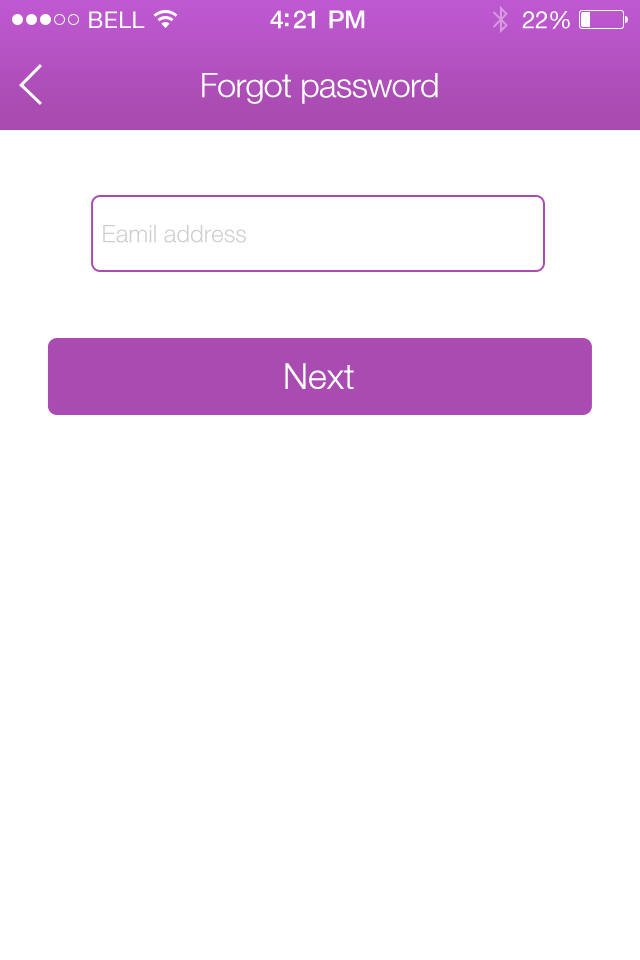
<style>
.page{position:relative;width:640px;height:960px;background:#ffffff}
.page>*{position:absolute;margin:0}
.t1{font:34px "HelveticaNeueLT-Light";letter-spacing:-0.02em;color:#ffffff}
.t2{font:24px "HelveticaNeueLT-Light";color:#cecece}
.t3{font:36px "HelveticaNeueLT-Light";color:#ffffff}
</style>
<div class="page">
<p class="t1" style="left:202px;top:73px;width:236px;height:31px">Forgot password</p>
<p class="t2" style="left:103px;top:225px;width:143px;height:18px">Eamil address</p>
<p class="t3" style="left:285px;top:363px;width:69px;height:26px">Next</p>
</div>
